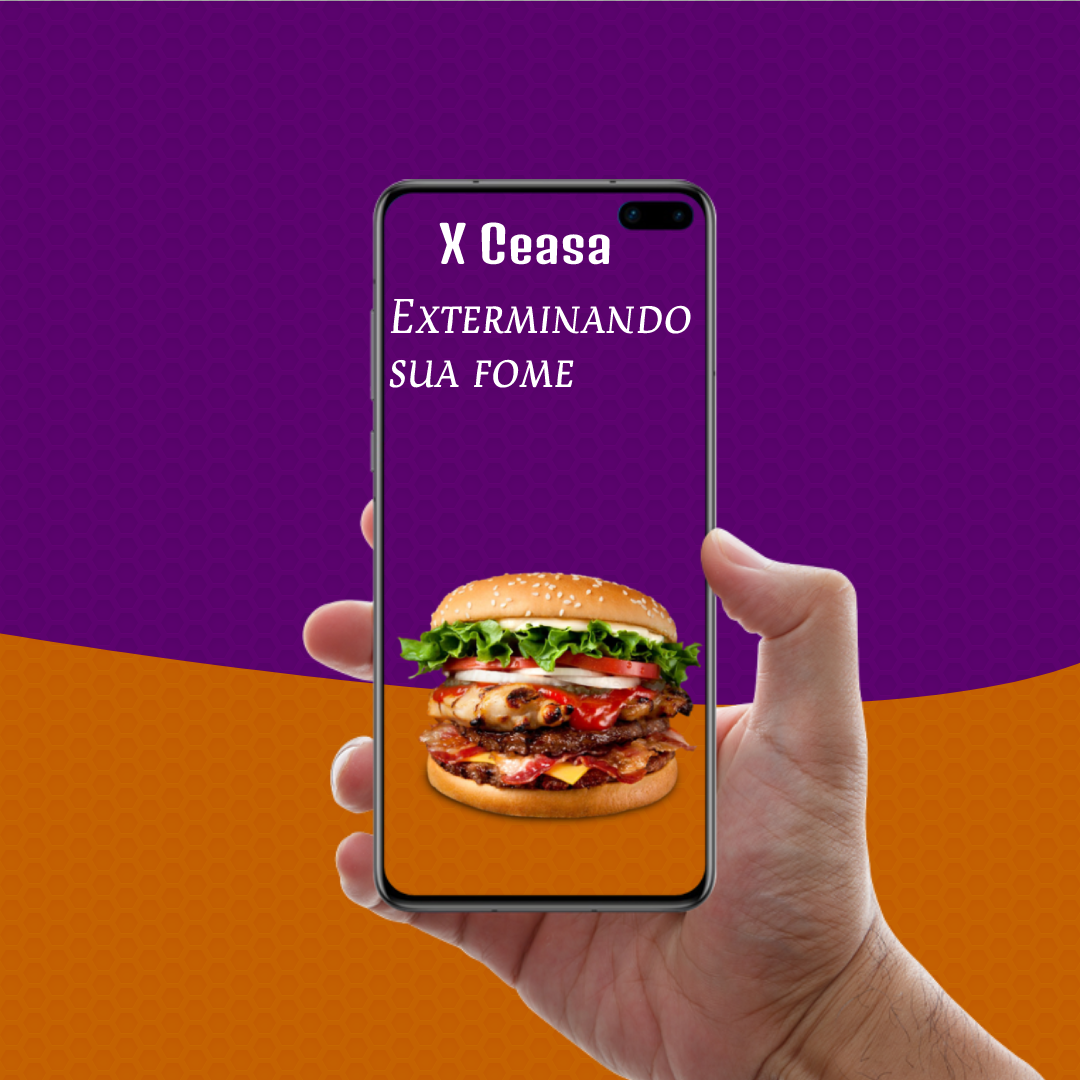
<style>
.page{position:relative;width:1080px;height:1080px}
.page>*{position:absolute;margin:0}
.t1{font:50px "DenkOne-Regular";color:#ffffff}
.t2{font:45px "DevroyeSCOSF";color:#ffffff}
</style>
<div class="page">
<p class="t1" style="left:439px;top:222px;width:171px;height:43px">X Ceasa</p>
<p class="t2" style="left:389px;top:298px;width:302px;height:90px">Exterminando sua fome</p>
</div>
